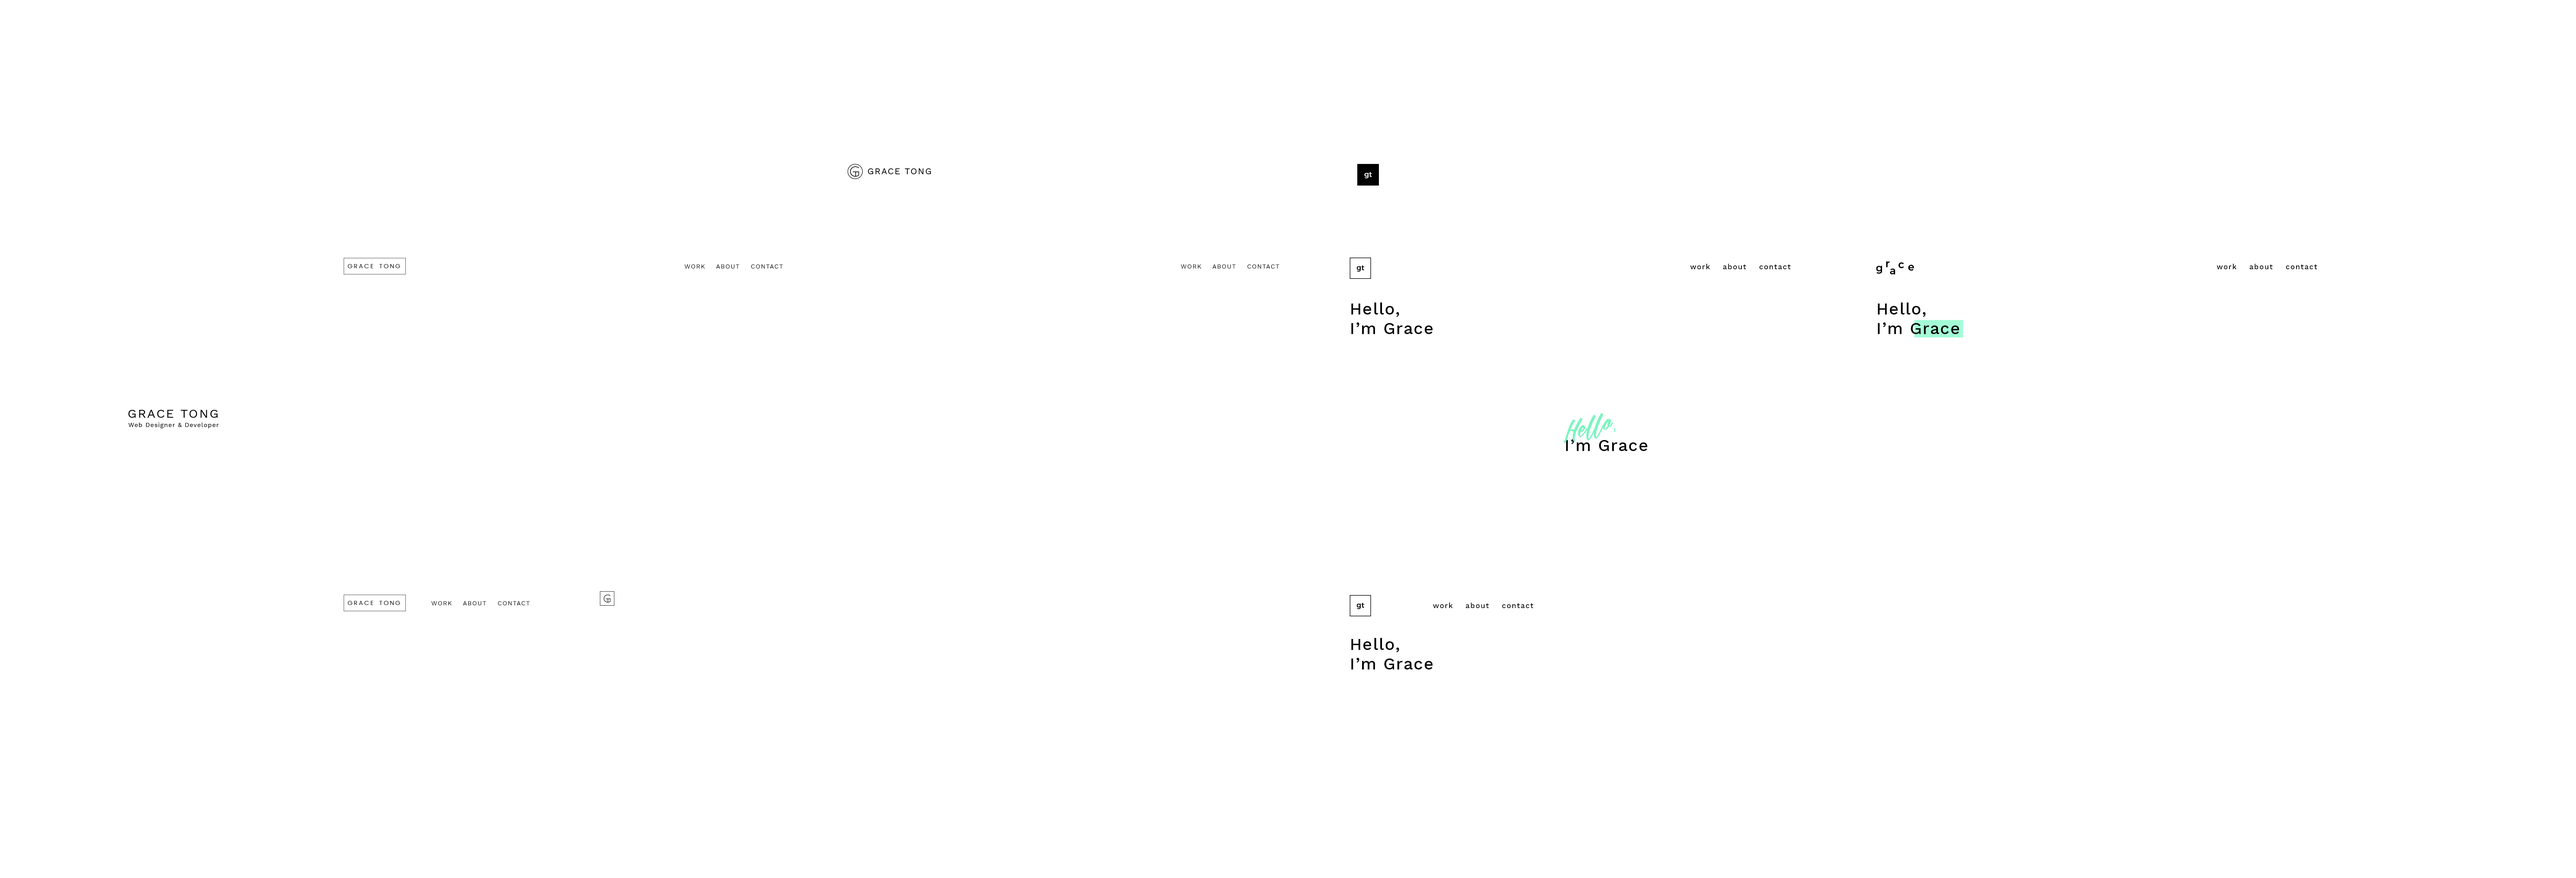
<style>
.page{position:relative;width:2576px;height:878px;background:#ffffff}
.page>*{position:absolute;margin:0}
.t1{font:8.8px "WorkSans-Regular";letter-spacing:0.1em;color:#000000;text-transform:uppercase}
.t2{font:6.2px "WorkSans-Regular";letter-spacing:0.1em;color:#000000;text-transform:uppercase}
.t3{font:7.2px "WorkSans-Medium";letter-spacing:0.1em;color:#000000}
.t4{font:16.5px "WorkSans-Medium";letter-spacing:0.05em;color:#000000}
.t5{font:12.3px "WorkSans-Regular";letter-spacing:0.1em;color:#000000;text-transform:uppercase}
.t6{font:24.7px "MekarScriptfree";letter-spacing:0.05em;color:#7af5bf}
.t7{font:24.7px "Lavanderia-Regular";letter-spacing:0.05em;color:#7af5bf}
.t8{font:6.2px "WorkSans-Regular";letter-spacing:0.075em;color:#000000}
</style>
<div class="page">
<p class="t1" style="left:868px;top:168px;width:63px;height:6px">Grace Tong</p>
<p class="t2" style="left:684px;top:264px;width:99px;height:5px">work    about    CONTACT</p>
<p class="t2" style="left:1181px;top:264px;width:98px;height:5px">work    about    CONTACT</p>
<p class="t3" style="left:1690px;top:264px;width:101px;height:5px">work    about    contact</p>
<p class="t3" style="left:2217px;top:264px;width:100px;height:5px">work    about    contact</p>
<p class="t4" style="left:1351px;top:303px;width:82px;height:31px">Hello, <br>I’m Grace</p>
<p class="t4" style="left:1878px;top:303px;width:81px;height:31px">Hello, <br>I’m Grace</p>
<p class="t5" style="left:128px;top:410px;width:90px;height:8px">Grace Tong</p>
<p class="t6" style="left:1563px;top:413px;width:52px;height:30px;rotate:-13deg">Hello<span class="t7">,</span></p>
<p class="t8" style="left:128px;top:423px;width:91px;height:5px">Web Designer &amp; Developer</p>
<p class="t4" style="left:1566px;top:439px;width:81px;height:12px">I’m Grace</p>
<p class="t2" style="left:431px;top:601px;width:99px;height:4px">work    about    CONTACT</p>
<p class="t3" style="left:1433px;top:603px;width:100px;height:5px">work    about    contact</p>
<p class="t4" style="left:1351px;top:638px;width:82px;height:32px">Hello, <br>I’m Grace</p>
</div>
